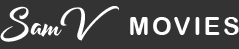
<style>
.page{position:relative;width:239px;height:49px;background:#333333}
.page>*{position:absolute;margin:0}
.t1{font:25px "ArialRoundedMTBold";letter-spacing:0.1em;color:#ffffff;text-transform:uppercase}
.t2{font:25px "Katrine";color:#ffffff}
</style>
<div class="page">
<p class="t1" style="left:0px;top:6px;width:239px;height:36px"><span class="t2">SamV   </span>Movies</p>
</div>
